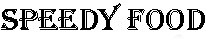
<style>
.page{position:relative;width:206px;height:40px;background:#ffffff}
.page>*{position:absolute;margin:0}
.t1{font:32.5px "Algerian";color:#000000}
</style>
<div class="page">
<p class="t1" style="left:1px;top:3px;width:204px;height:27px">SPEEDY FOOD</p>
</div>
